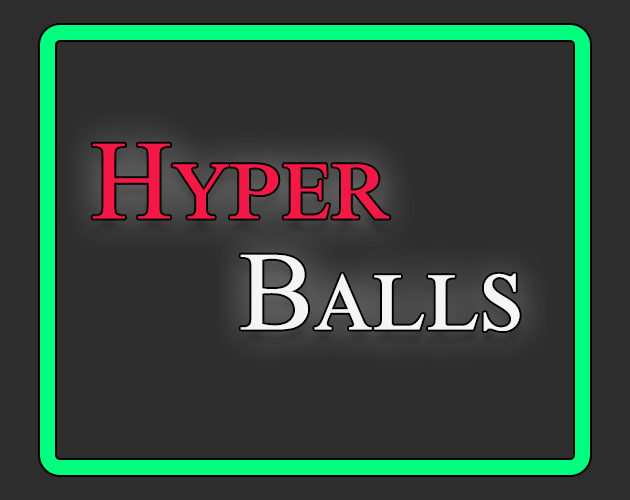
<style>
.page{position:relative;width:630px;height:500px;background:#2d2d2d}
.page>*{position:absolute;margin:0}
.t1{font:112.5px "TimesNewRomanPSMT";color:#f41847;font-variant:small-caps}
.t2{font:112.5px "TimesNewRomanPSMT";color:#f5f5f5;font-variant:small-caps}
</style>
<div class="page">
<p class="t1" style="left:92px;top:143px;width:298px;height:76px">Hyper</p>
<p class="t2" style="left:240px;top:254px;width:280px;height:77px">Balls</p>
</div>
